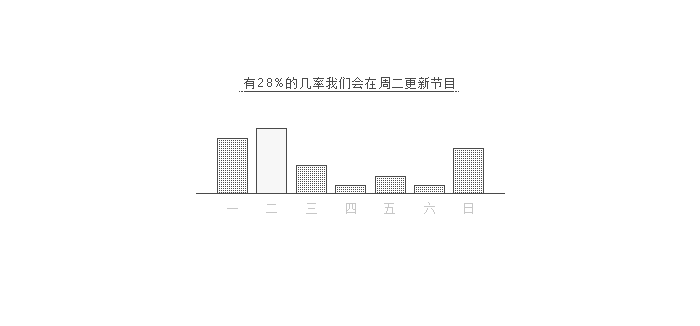
<style>
.page{position:relative;width:700px;height:326px;background:#ffffff}
.page>*{position:absolute;margin:0}
.t1{font:12px "FZXS12--GB1-0";letter-spacing:0.1em;color:#4a4a4a}
.t2{font:12px "Avenir-Book";letter-spacing:0.1em;color:#4a4a4a}
.t3{font:12px "FZXS12--GB1-0";letter-spacing:-0.08em;color:#c7c7c7}
</style>
<div class="page">
<p class="t1" style="left:244px;top:77px;width:210px;height:12px">有<span class="t2">28%</span>的几率我们会在周二更新节目</p>
<p class="t3" style="left:266px;top:204px;width:11px;height:9px">二</p>
<p class="t3" style="left:306px;top:203px;width:11px;height:11px">三</p>
<p class="t3" style="left:346px;top:203px;width:10px;height:11px">四</p>
<p class="t3" style="left:384px;top:203px;width:11px;height:11px">五</p>
<p class="t3" style="left:424px;top:202px;width:11px;height:12px">六</p>
<p class="t3" style="left:464px;top:203px;width:9px;height:11px">日</p>
</div>
